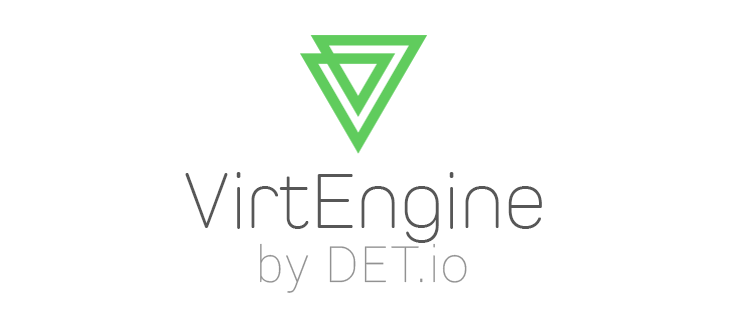
<style>
.page{position:relative;width:730px;height:318px;background:#ffffff}
.page>*{position:absolute;margin:0}
.t1{font:81.7px "PeroW01-Light";color:#575757}
.t2{font:50px "Roboto-Thin";letter-spacing:0.04em;color:#929292}
</style>
<div class="page">
<p class="t1" style="left:185px;top:172px;width:357px;height:71px">VirtEngine</p>
<p class="t2" style="left:260px;top:243px;width:207px;height:50px">by DET.io</p>
</div>
